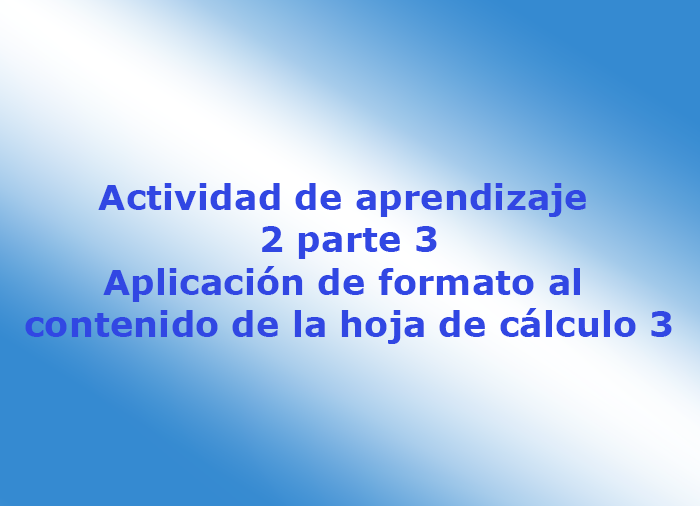
<style>
.page{position:relative;width:700px;height:506px}
.page>*{position:absolute;margin:0}
.t1{font:35.3px "Verdana-Bold";color:#3147e3}
</style>
<div class="page">
<p class="t1" style="left:25px;top:183px;width:647px;height:161px;text-align:center">Actividad de aprendizaje <br>2 parte 3<br>Aplicación de formato al <br>contenido de la hoja de cálculo 3</p>
</div>
